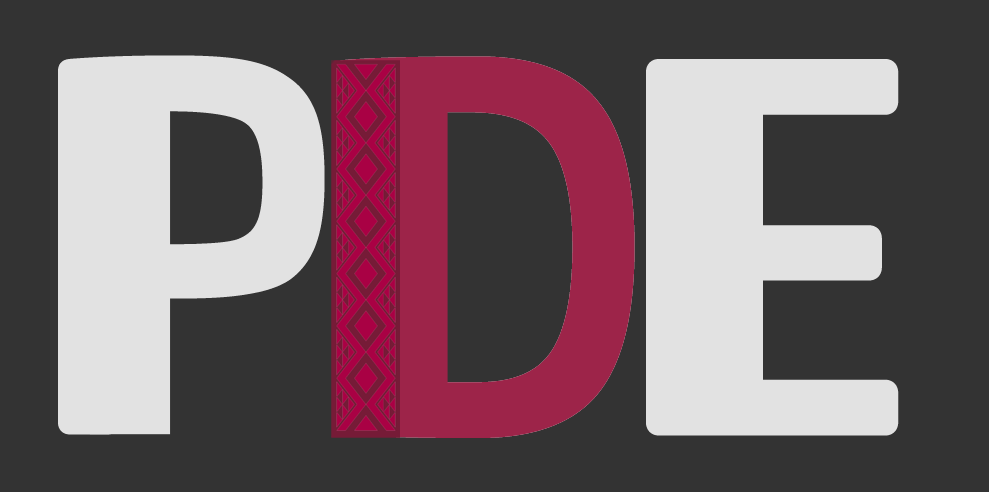
<style>
.page{position:relative;width:989px;height:492px;background:#333333}
.page>*{position:absolute;margin:0}
.t1{font:480.2px "UniviaPro-Regular";color:#e2e2e2;font-weight:bold}
.t2{font:480.2px "UniviaPro-Regular";font-weight:bold}
.t3{font:480.2px "UniviaPro-Regular";color:#9d2449;font-weight:bold}
</style>
<div class="page">
<p class="t1" style="left:58px;top:55px;width:267px;height:380px">P</p>
<p class="t2" style="left:333px;top:56px;width:302px;height:382px">D</p>
<p class="t3" style="left:333px;top:56px;width:302px;height:382px">D</p>
<p class="t1" style="left:646px;top:59px;width:253px;height:377px">E</p>
</div>
